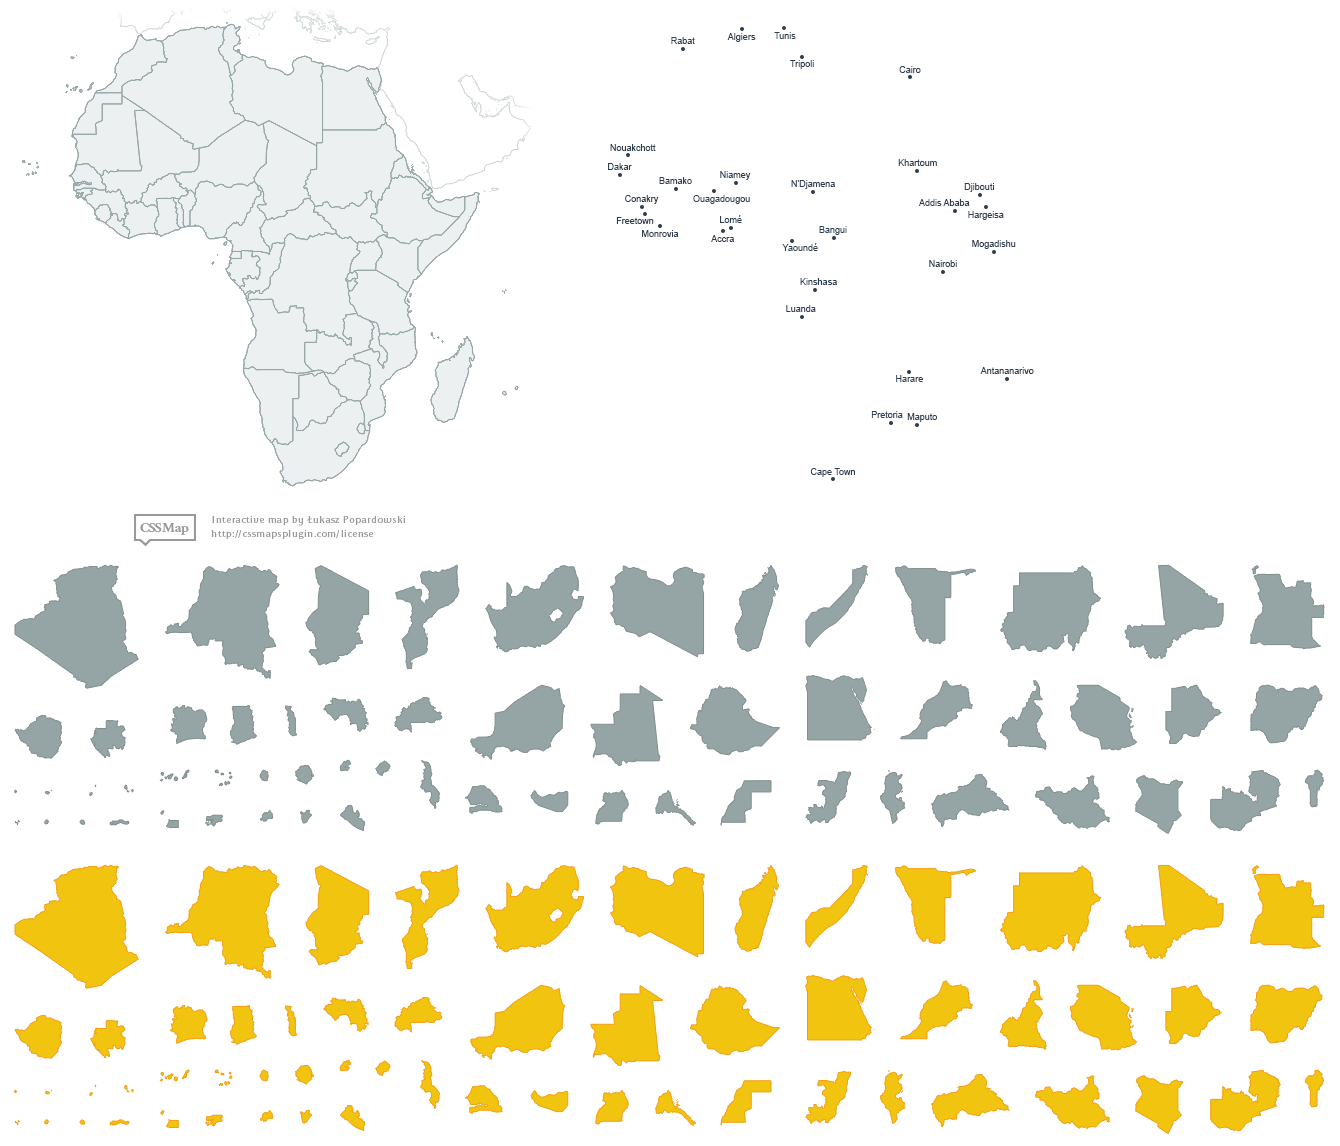
<style>
.page{position:relative;width:1340px;height:1146px;background:#ffffff}
.page>*{position:absolute;margin:0}
.t1{font:9px "ArialMT";color:#2c3e50}
</style>
<div class="page">
<p class="t1" style="left:671px;top:37px;width:24px;height:7px">Rabat</p>
<p class="t1" style="left:727px;top:33px;width:29px;height:9px">Algiers</p>
<p class="t1" style="left:774px;top:32px;width:22px;height:7px">Tunis</p>
<p class="t1" style="left:790px;top:60px;width:24px;height:9px">Tripoli</p>
<p class="t1" style="left:899px;top:66px;width:22px;height:7px">Cairo</p>
<p class="t1" style="left:610px;top:144px;width:46px;height:7px">Nouakchott</p>
<p class="t1" style="left:898px;top:159px;width:39px;height:7px">Khartoum</p>
<p class="t1" style="left:608px;top:163px;width:24px;height:7px">Dakar</p>
<p class="t1" style="left:720px;top:171px;width:31px;height:9px">Niamey</p>
<p class="t1" style="left:659px;top:177px;width:33px;height:7px">Bamako</p>
<p class="t1" style="left:791px;top:180px;width:44px;height:9px">N'Djamena</p>
<p class="t1" style="left:964px;top:183px;width:30px;height:9px">Djibouti</p>
<p class="t1" style="left:625px;top:195px;width:34px;height:9px">Conakry</p>
<p class="t1" style="left:693px;top:195px;width:57px;height:9px">Ouagadougou</p>
<p class="t1" style="left:918px;top:199px;width:52px;height:7px">Addis Ababa</p>
<p class="t1" style="left:616px;top:217px;width:38px;height:7px">Freetown</p>
<p class="t1" style="left:720px;top:215px;width:22px;height:8px">Lomé</p>
<p class="t1" style="left:968px;top:211px;width:36px;height:9px">Hargeisa</p>
<p class="t1" style="left:642px;top:230px;width:37px;height:7px">Monrovia</p>
<p class="t1" style="left:819px;top:226px;width:28px;height:9px">Bangui</p>
<p class="t1" style="left:711px;top:235px;width:23px;height:7px">Accra</p>
<p class="t1" style="left:782px;top:243px;width:36px;height:8px">Yaoundé</p>
<p class="t1" style="left:972px;top:240px;width:44px;height:9px">Mogadishu</p>
<p class="t1" style="left:929px;top:260px;width:28px;height:7px">Nairobi</p>
<p class="t1" style="left:800px;top:278px;width:37px;height:7px">Kinshasa</p>
<p class="t1" style="left:786px;top:305px;width:30px;height:7px">Luanda</p>
<p class="t1" style="left:896px;top:375px;width:27px;height:7px">Harare</p>
<p class="t1" style="left:980px;top:367px;width:54px;height:7px">Antananarivo</p>
<p class="t1" style="left:871px;top:411px;width:32px;height:7px">Pretoria</p>
<p class="t1" style="left:907px;top:413px;width:30px;height:9px">Maputo</p>
<p class="t1" style="left:810px;top:468px;width:45px;height:9px">Cape Town</p>
</div>
